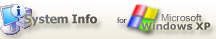
<style>
.page{position:relative;width:216px;height:39px}
.page>*{position:absolute;margin:0}
.t1{font:12px "Tahoma-Bold"}
.t2{font:8px "MicrosoftSansSerif";color:#58585c}
.t3{font:10px "MicrosoftSansSerif";color:#6e6e7c}
.t4{font:10px "Verdana-Bold"}
</style>
<div class="page">
<p class="t1" style="left:24px;top:14px;width:73px;height:12px">System Info</p>
<p class="t2" style="left:117px;top:17px;width:10px;height:6px">for</p>
<p class="t3" style="left:161px;top:14px;width:41px;height:8px">Microsoft</p>
<p class="t4" style="left:141px;top:22px;width:70px;height:8px">Windows XP</p>
</div>
